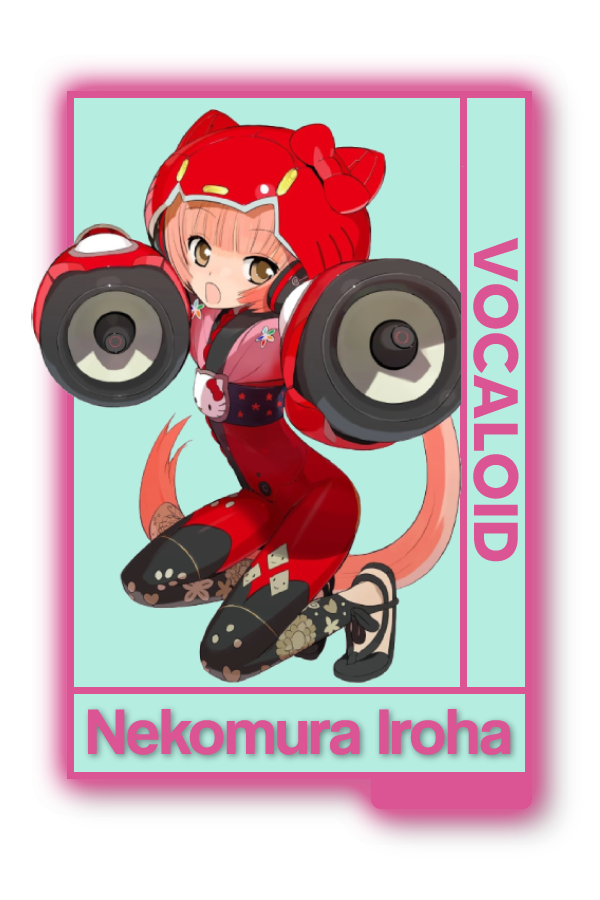
<style>
.page{position:relative;width:600px;height:900px;background:#b5ede1}
.page>*{position:absolute;margin:0}
.t1{font:62.5px "MADETOMMY-Bold";color:#db5493}
.t2{font:67.1px "CoolveticaRg-Regular";color:#db5493}
</style>
<div class="page">
<p class="t1" style="left:473px;top:237px;width:46px;height:325px;rotate:90deg">VOCALOID</p>
<p class="t2" style="left:88px;top:709px;width:423px;height:46px">Nekomura Iroha</p>
</div>
